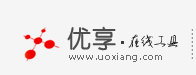
<style>
.page{position:relative;width:196px;height:75px;background:#f5f5f5}
.page>*{position:absolute;margin:0}
.t1{font:24px "YouYuan";color:#4f4e4e;font-weight:bold}
.t2{font:12px "-";letter-spacing:0.068em;color:#030303}
.t3{font:10px "Tahoma";letter-spacing:0.068em;color:#6d6d6d}
</style>
<div class="page">
<p class="t1" style="left:67px;top:26px;width:49px;height:25px">优享</p>
<p class="t2" style="left:128px;top:34px;width:50px;height:14px">在线工具</p>
<p class="t3" style="left:69px;top:53px;width:93px;height:9px">www.uoxiang.com</p>
</div>
